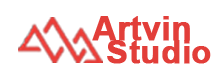
<style>
.page{position:relative;width:220px;height:80px;background:#ffffff}
.page>*{position:absolute;margin:0}
.t1{font:32.8px "Arial-BoldMT";color:#e23e39;font-weight:bold}
.t2{font:32.4px "Arial-BoldMT";color:#e23e39;font-weight:bold}
</style>
<div class="page">
<p class="t1" style="left:92px;top:16px;width:98px;height:25px">Artvin</p>
<p class="t2" style="left:107px;top:40px;width:104px;height:24px">Studio</p>
</div>
